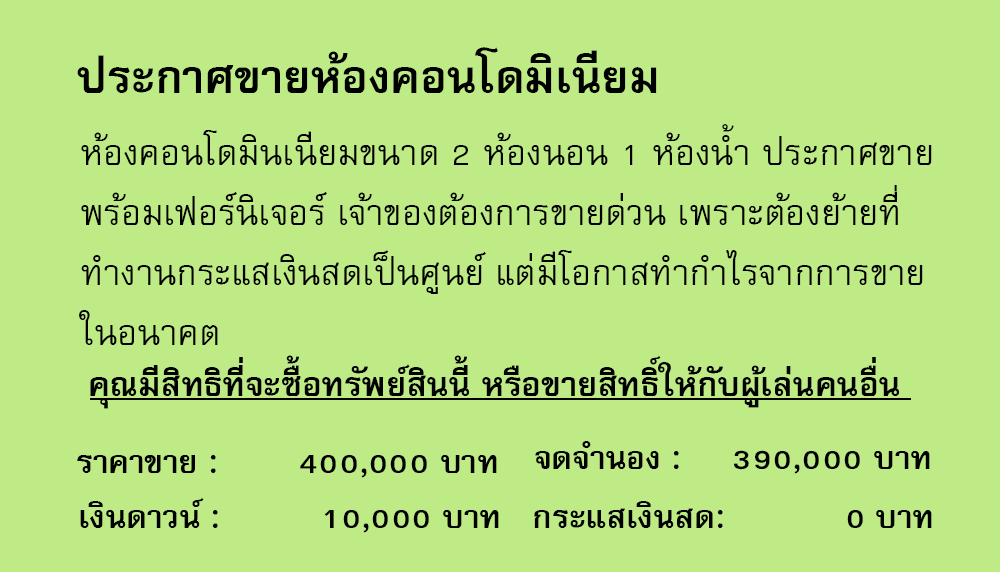
<style>
.page{position:relative;width:1000px;height:572px;background:#beeb85}
.page>*{position:absolute;margin:0}
.t1{font:64px "FreesiaUPCBold";color:#000000}
.t2{font:50px/60px "FreesiaUPC";color:#000000}
.t3{font:47px "FreesiaUPCBold";color:#000000}
.t4{font:45px "FreesiaUPCBold";color:#000000}
</style>
<div class="page">
<p class="t1" style="left:77px;top:47px;width:580px;height:46px">ประกาศขายห้องคอนโดมิเนียม</p>
<p class="t2" style="left:79px;top:124px;width:853px;height:221px">ห้องคอนโดมินเนียมขนาด 2 ห้องนอน 1 ห้องน้ำ ประกาศขาย<br>พร้อมเฟอร์นิเจอร์ เจ้าของต้องการขายด่วน เพราะต้องย้ายที่<br>ทำงานกระแสเงินสดเป็นศูนย์ แต่มีโอกาสทำกำไรจากการขาย<br>ในอนาคต</p>
<p class="t3" style="left:90px;top:355px;width:810px;height:54px">คุณมีสิทธิที่จะซื้อทรัพย์สินนี้ หรือขายสิทธิ์ให้กับผู้เล่นคนอื่น</p>
<p class="t4" style="left:535px;top:441px;width:395px;height:33px">จดจำนอง :     390,000 บาท</p>
<p class="t4" style="left:77px;top:455px;width:420px;height:23px">ราคาขาย :        400,000 บาท</p>
<p class="t4" style="left:80px;top:497px;width:419px;height:36px">เงินดาวน์ :          10,000 บาท</p>
<p class="t4" style="left:534px;top:501px;width:398px;height:27px">กระแสเงินสด:            0 บาท</p>
</div>
